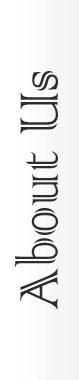
<style>
.page{position:relative;width:79px;height:380px;background:#ffffff}
.page>*{position:absolute;margin:0}
.t1{font:71.4px "ColonnaMT";color:#2d2d2d;scale:0.86 1}
</style>
<div class="page">
<p class="t1" style="left:14px;top:71px;width:44px;height:238px;rotate:-90deg">About Us</p>
</div>
